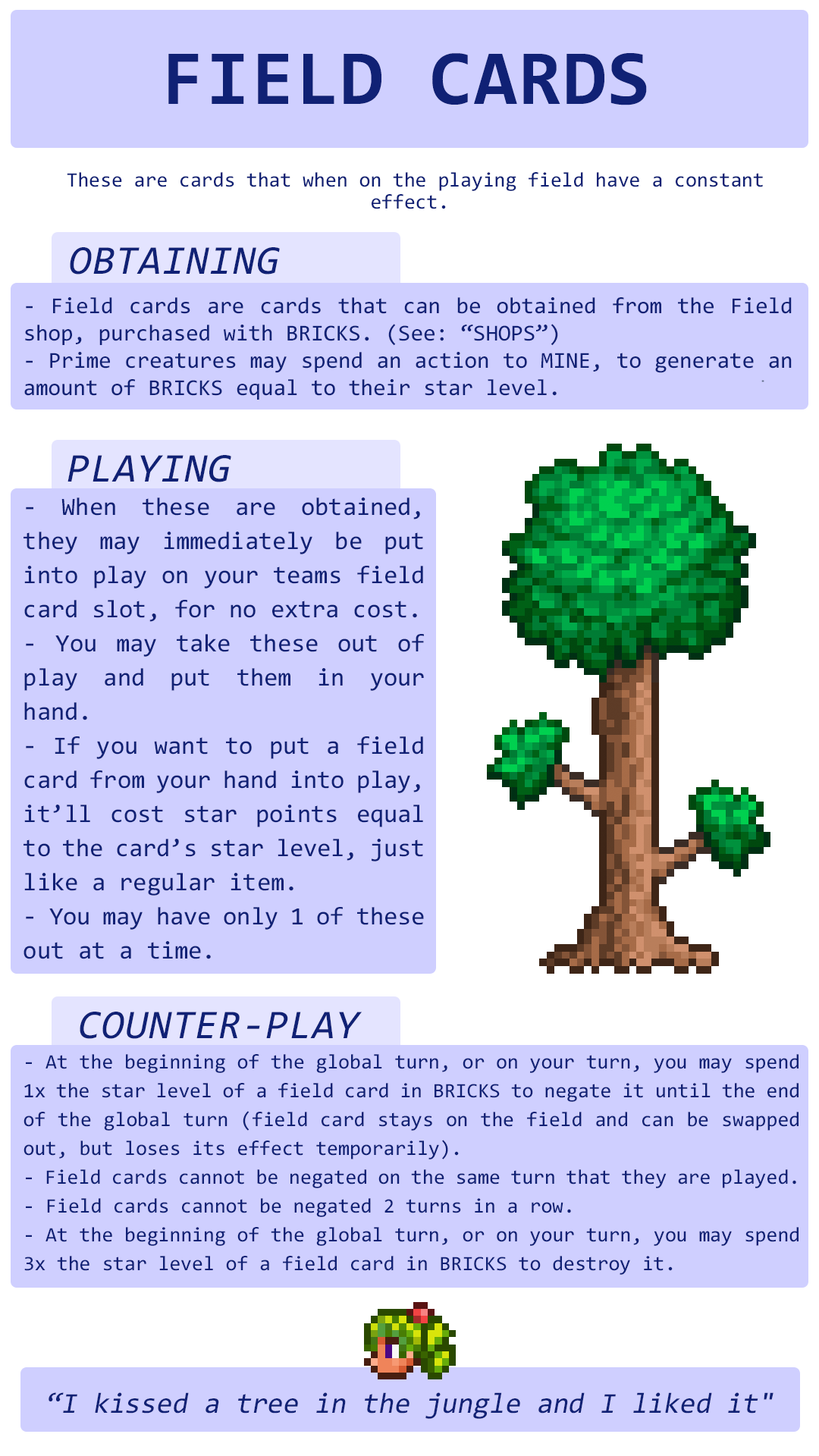
<style>
.page{position:relative;width:819px;height:1456px;background:#cfcfff}
.page>*{position:absolute;margin:0}
.t1{font:78.3px "Consolas-Bold";letter-spacing:0.02em;color:#102175}
.t2{font:20.5px/22.4px "Consolas";color:#102175}
.t3{font:41.1px "Consolas-Italic";letter-spacing:0.02em;color:#102175}
.t4{font:22.7px/27.3px "Consolas";color:#102175}
.t5{font:25px/34.1px "Consolas";color:#102175}
.t6{font:20.5px/28.8px "Consolas";color:#102175}
.t7{font:28.8px "Consolas";color:#102175;font-style:italic}
</style>
<div class="page">
<p class="t1" style="left:168px;top:53px;width:479px;height:52px">FIELD CARDS</p>
<p class="t2" style="left:67px;top:172px;width:696px;height:37px;text-align:center">These are cards that when on the playing field have a constant effect.</p>
<p class="t3" style="left:70px;top:247px;width:210px;height:28px">OBTAINING</p>
<p class="t4" style="left:24px;top:297px;width:768px;height:103px;text-align:justify">- Field cards are cards that can be obtained from the Field shop, purchased with BRICKS. (See: “SHOPS”)<br>- Prime creatures may spend an action to MINE, to generate an amount of BRICKS equal to their star level.</p>
<p class="t3" style="left:67px;top:455px;width:164px;height:27px">PLAYING</p>
<p class="t5" style="left:24px;top:497px;width:400px;height:462px;text-align:justify">- When these are obtained, they may immediately be put into play on your teams field card slot, for no extra cost.<br>- You may take these out of play and put them in your hand. <br>- If you want to put a field card from your hand into play, it’ll cost star points equal to the card’s star level, just like a regular item.<br>- You may have only 1 of these out at a time.</p>
<p class="t3" style="left:80px;top:1012px;width:282px;height:27px">COUNTER-PLAY</p>
<p class="t6" style="left:24px;top:1054px;width:775px;height:221px;text-align:justify">- At the beginning of the global turn, or on your turn, you may spend 1x the star level of a field card in BRICKS to negate it until the end of the global turn (field card stays on the field and can be swapped out, but loses its effect temporarily).<br>- Field cards cannot be negated on the same turn that they are played.<br>- Field cards cannot be negated 2 turns in a row.<br>- At the beginning of the global turn, or on your turn, you may spend 3x the star level of a field card in BRICKS to destroy it.</p>
<p class="t7" style="left:49px;top:1392px;width:724px;height:27px">“I kissed a tree in the jungle and I liked it"</p>
</div>
